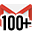
<style>
.page{position:relative;width:32px;height:32px;background:#ffffff}
.page>*{position:absolute;margin:0}
.t1{font:22.6px "AcuminConcept-ExtraCondensedBold";color:#000000}
.t2{font:22px "AcuminConcept-CondensedBold";color:#000000}
</style>
<div class="page">
<p class="t1" style="left:2px;top:15px;width:21px;height:16px">100</p>
<p class="t2" style="left:21px;top:18px;width:11px;height:11px">+</p>
</div>
